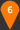
<style>
.page{position:relative;width:20px;height:30px;background:#ff7800}
.page>*{position:absolute;margin:0}
.t1{font:9px "OpenSans";color:#ffffff;font-weight:bold}
</style>
<div class="page">
<p class="t1" style="left:7px;top:6px;width:6px;height:8px">6</p>
</div>
